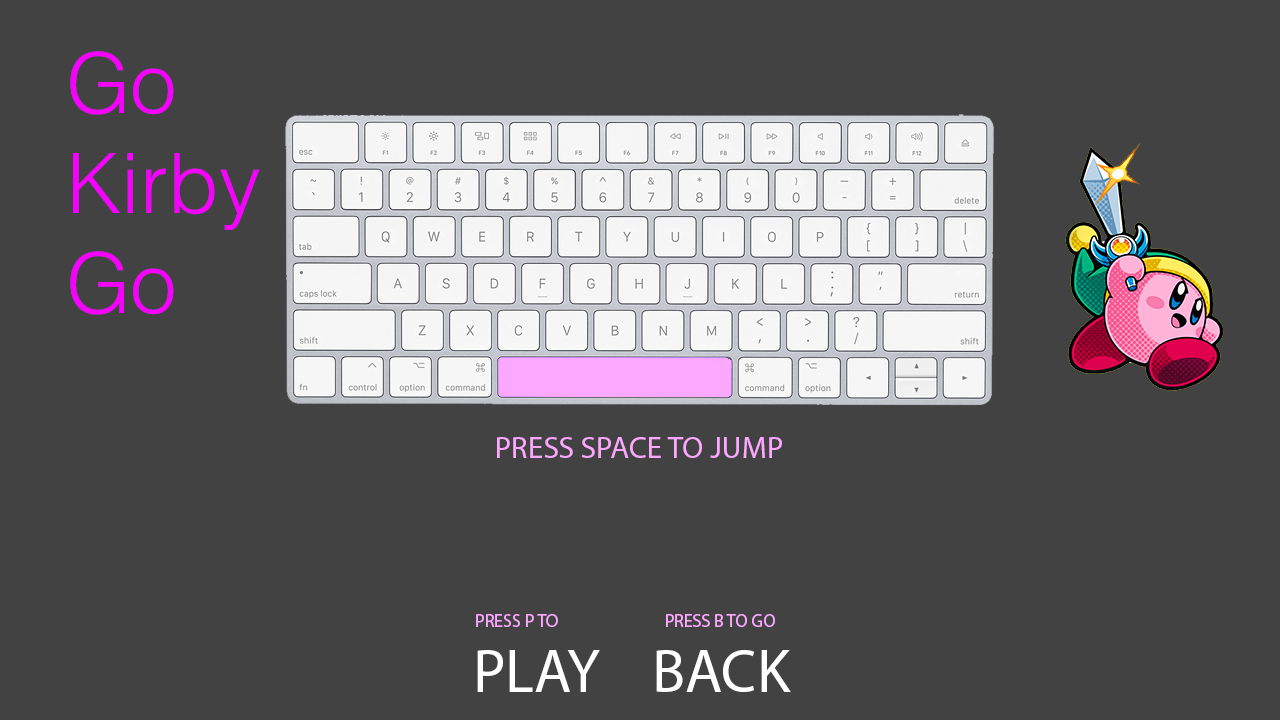
<style>
.page{position:relative;width:1280px;height:720px;background:#424242}
.page>*{position:absolute;margin:0}
.t1{font:83.4px "Helvetica-Light";color:#f600ff}
.t2{font:31.2px "MyriadPro-Regular";color:#fca8ff}
.t3{font:18px "MyriadPro-Regular";color:#fca8ff}
.t4{font:61px "MyriadPro-Regular";color:#ffffff}
</style>
<div class="page">
<p class="t1" style="left:70px;top:51px;width:190px;height:264px">Go <br>Kirby <br>Go</p>
<p class="t2" style="left:497px;top:437px;width:285px;height:21px">PRESS SPACE TO JUMP</p>
<p class="t3" style="left:476px;top:614px;width:82px;height:13px">PRESS P TO</p>
<p class="t3" style="left:666px;top:614px;width:109px;height:13px">PRESS B TO GO</p>
<p class="t4" style="left:477px;top:650px;width:123px;height:42px">PLAY</p>
<p class="t4" style="left:656px;top:650px;width:135px;height:42px">BACK</p>
</div>
